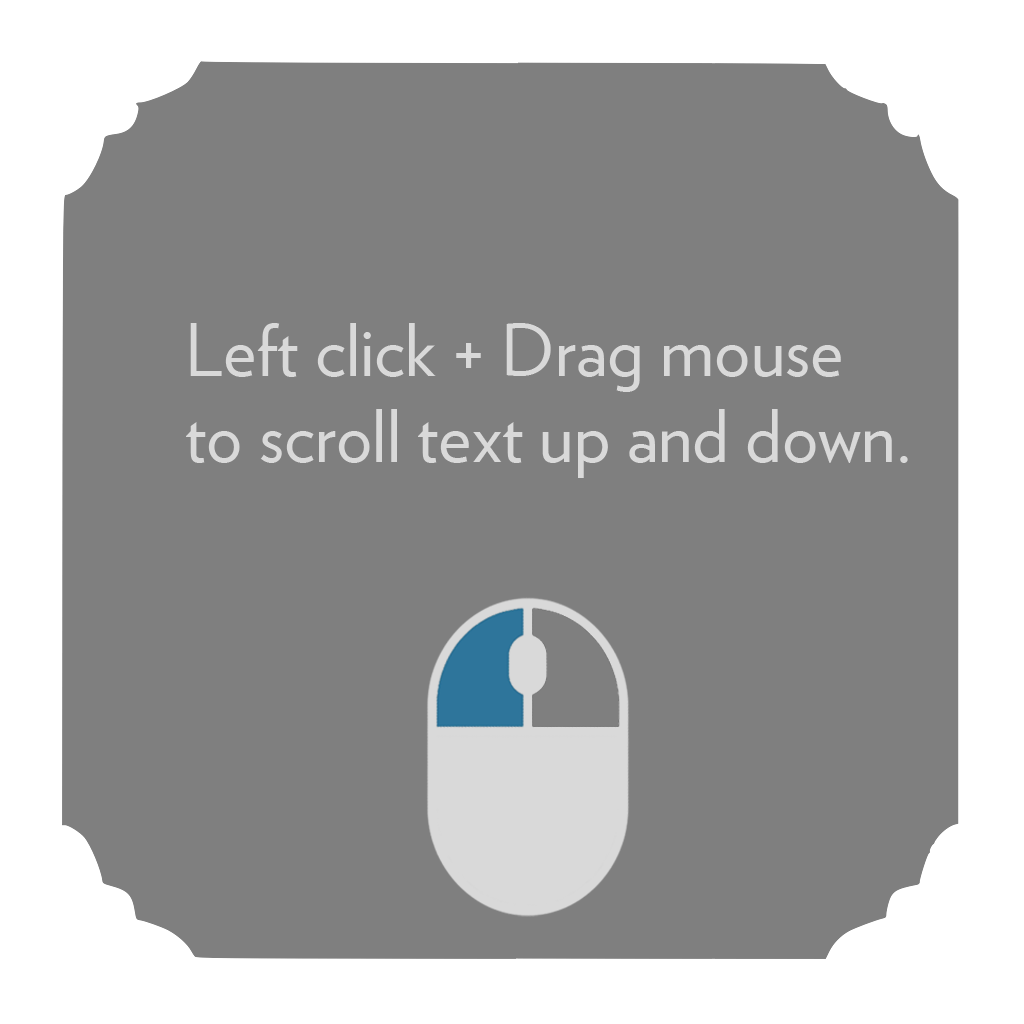
<style>
.page{position:relative;width:1024px;height:1024px;background:#7f7f7f}
.page>*{position:absolute;margin:0}
.t1{font:72px "Verlag-Book";color:#d9d9d9}
</style>
<div class="page">
<p class="t1" style="left:186px;top:323px;width:722px;height:155px">Left click + Drag mouse<br>to scroll text up and down.</p>
</div>
